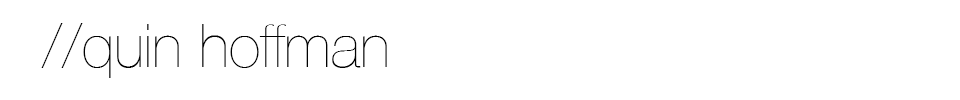
<style>
.page{position:relative;width:960px;height:100px;background:#ffffff}
.page>*{position:absolute;margin:0}
.t1{font:60px "HelveticaNeue-UltraLight";color:#000000}
</style>
<div class="page">
<p class="t1" style="left:41px;top:23px;width:346px;height:55px">//quin hoffman</p>
</div>
